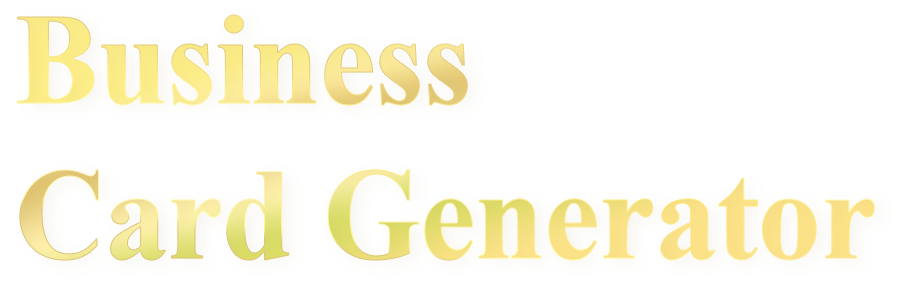
<style>
.page{position:relative;width:908px;height:290px;background:#ffffff}
.page>*{position:absolute;margin:0}
.t1{font:128.9px "TimesNewRomanPS-BoldMT";color:#f8e286;scale:0.97 1}
</style>
<div class="page">
<p class="t1" style="left:17px;top:15px;width:858px;height:245px">Business <br>Card Generator</p>
</div>
